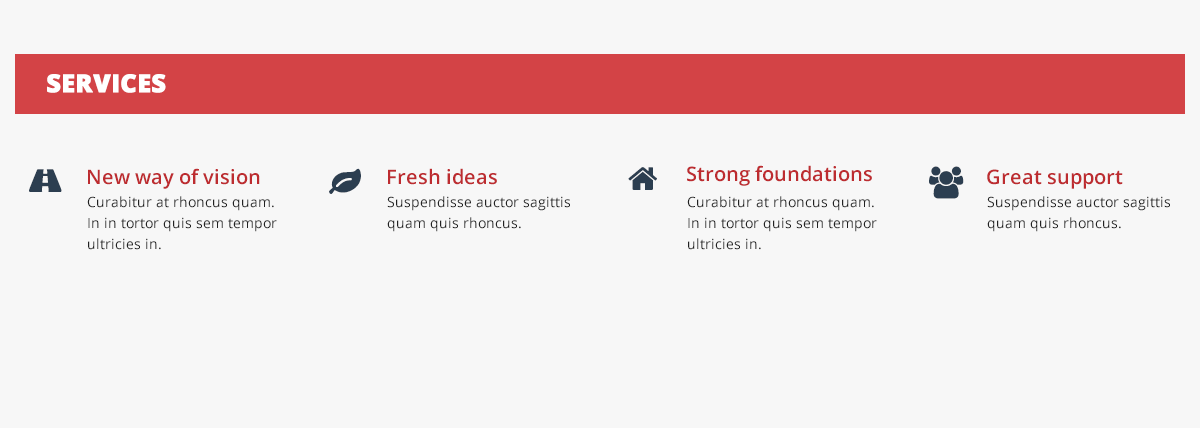
<style>
.page{position:relative;width:1200px;height:428px;background:#f7f7f7}
.page>*{position:absolute;margin:0}
.t1{font:25px "OpenSans-Extrabold";color:#ffffff;font-weight:bold}
.t2{font:20px "OpenSans-Semibold";color:#bd2c30}
.t3{font:14px/21px "OpenSans";color:#212121}
</style>
<div class="page">
<p class="t1" style="left:47px;top:74px;width:119px;height:19px">SERVICES</p>
<p class="t2" style="left:88px;top:168px;width:172px;height:21px">New way of vision</p>
<p class="t2" style="left:388px;top:168px;width:109px;height:17px">Fresh ideas</p>
<p class="t2" style="left:687px;top:165px;width:185px;height:21px">Strong foundations</p>
<p class="t2" style="left:987px;top:169px;width:136px;height:20px">Great support</p>
<p class="t3" style="left:87px;top:196px;width:190px;height:54px">Curabitur at rhoncus quam. In in tortor quis sem tempor ultricies in.</p>
<p class="t3" style="left:387px;top:196px;width:183px;height:36px">Suspendisse auctor sagittis quam quis rhoncus.</p>
<p class="t3" style="left:687px;top:196px;width:190px;height:54px">Curabitur at rhoncus quam. In in tortor quis sem tempor ultricies in.</p>
<p class="t3" style="left:987px;top:196px;width:183px;height:36px">Suspendisse auctor sagittis quam quis rhoncus.</p>
</div>
